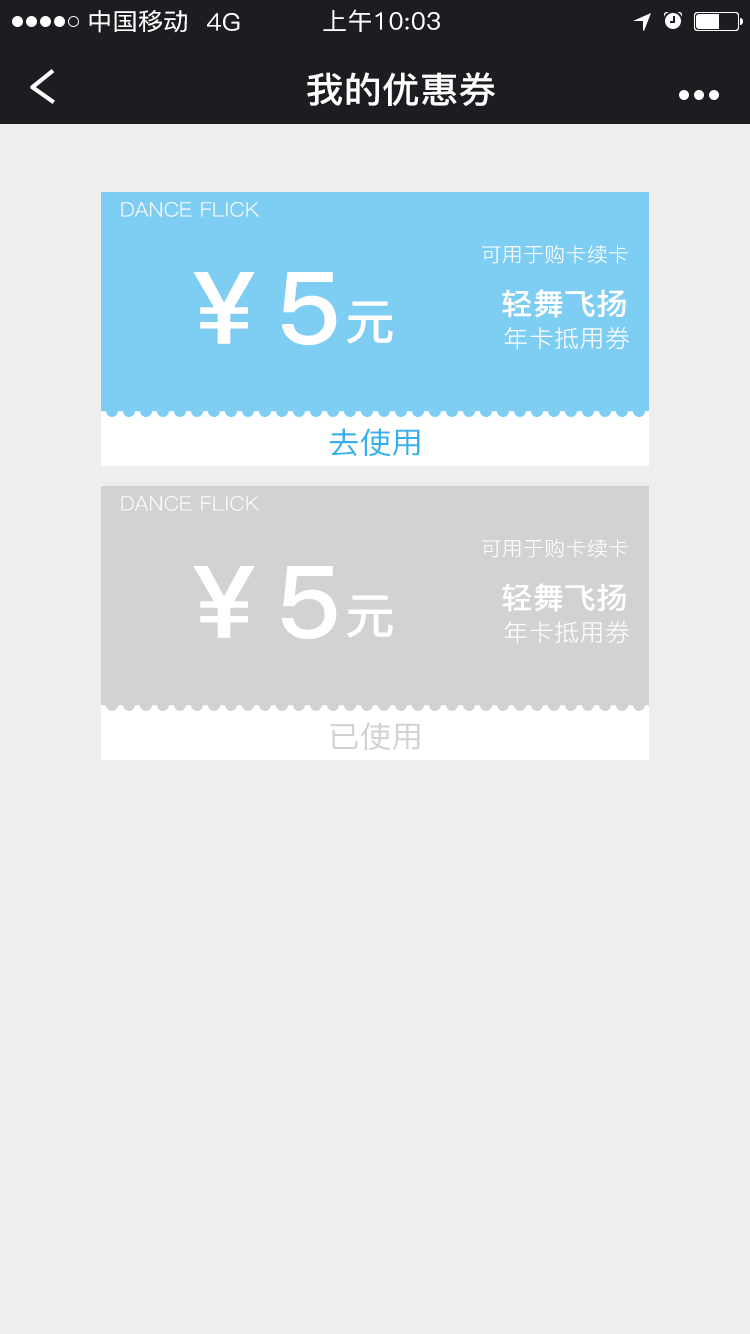
<style>
.page{position:relative;width:750px;height:1334px;background:#eeeeee}
.page>*{position:absolute;margin:0}
.t1{font:24px "PingFang-SC-Medium";letter-spacing:0.01em;color:#ffffff;scale:1.05 1}
.t2{font:36px "PingFang-SC-Bold";letter-spacing:0.01em;color:#ffffff;scale:1.05 1}
.t3{font:20px "PingFang-SC-Regular";letter-spacing:0.01em;color:#fdfdfd;scale:1.05 1}
.t4{font:20px "PingFang-SC-Regular";letter-spacing:0.01em;color:#ffffff;scale:1.05 1}
.t5{font:100px "PingFang-SC-Bold";letter-spacing:0.01em;color:#ffffff;scale:1.05 1}
.t6{font:30px "PingFang-SC-Bold";letter-spacing:0.01em;color:#ffffff;scale:1.05 1}
.t7{font:48px "PingFang-SC-Bold";letter-spacing:0.01em;color:#ffffff;scale:1.05 1}
.t8{font:24px "PingFang-SC-Regular";letter-spacing:0.01em;color:#ffffff;scale:1.05 1}
.t9{font:30px "PingFang-SC-Medium";letter-spacing:0.01em;color:#34b2ed;scale:1.05 1}
.t10{font:30px "PingFang-SC-Medium";letter-spacing:0.01em;color:#d2d2d2;scale:1.05 1}
</style>
<div class="page">
<p class="t1" style="left:89px;top:10px;width:98px;height:23px">中国移动</p>
<p class="t1" style="left:207px;top:13px;width:33px;height:18px">4G</p>
<p class="t1" style="left:323px;top:9px;width:117px;height:23px">上午10:03</p>
<p class="t2" style="left:307px;top:72px;width:188px;height:34px">我的优惠券</p>
<p class="t3" style="left:121px;top:202px;width:138px;height:15px">DANCE FLICK</p>
<p class="t4" style="left:482px;top:245px;width:146px;height:19px">可用于购卡续卡</p>
<p class="t5" style="left:193px;top:272px;width:144px;height:74px">￥5</p>
<p class="t6" style="left:502px;top:289px;width:124px;height:29px">轻舞飞扬</p>
<p class="t7" style="left:347px;top:301px;width:46px;height:43px">元</p>
<p class="t8" style="left:504px;top:327px;width:125px;height:23px">年卡抵用券</p>
<p class="t9" style="left:329px;top:428px;width:91px;height:29px">去使用</p>
<p class="t3" style="left:121px;top:496px;width:138px;height:15px">DANCE FLICK</p>
<p class="t4" style="left:482px;top:539px;width:146px;height:19px">可用于购卡续卡</p>
<p class="t5" style="left:193px;top:566px;width:144px;height:74px">￥5</p>
<p class="t6" style="left:502px;top:583px;width:124px;height:29px">轻舞飞扬</p>
<p class="t7" style="left:347px;top:595px;width:46px;height:43px">元</p>
<p class="t8" style="left:504px;top:621px;width:125px;height:23px">年卡抵用券</p>
<p class="t10" style="left:330px;top:722px;width:90px;height:29px">已使用</p>
</div>
